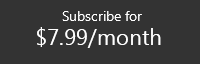
<style>
.page{position:relative;width:200px;height:64px;background:#333333}
.page>*{position:absolute;margin:0}
.t1{font:14px "SegoeUISymbol";color:#ffffff}
.t2{font:22.2px "SegoeUISymbol";color:#ffffff}
</style>
<div class="page">
<p class="t1" style="left:62px;top:11px;width:80px;height:10px">Subscribe for</p>
<p class="t2" style="left:37px;top:27px;width:124px;height:21px">$7.99/month</p>
</div>
